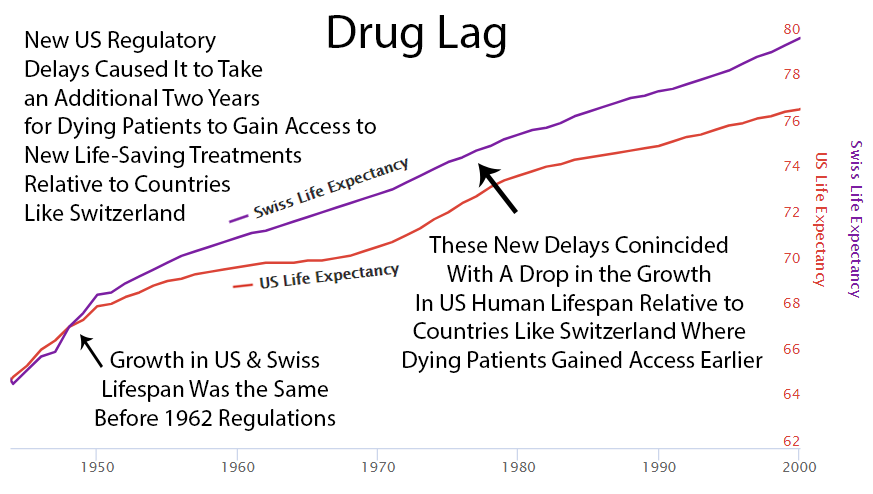
<style>
.page{position:relative;width:873px;height:494px;background:#ffffff}
.page>*{position:absolute;margin:0}
.t1{font:48px "MyriadPro-Regular";color:#000000}
.t2{font:24px "MyriadPro-Regular";color:#000000}
</style>
<div class="page">
<p class="t1" style="left:328px;top:15px;width:178px;height:43px">Drug Lag</p>
<p class="t2" style="left:24px;top:31px;width:352px;height:190px">New US Regulatory<br>Delays Caused It to Take<br>an Additional Two Years<br>for Dying Patients to Gain Access to <br>New Life-Saving Treatments<br>Relative to Countries<br>Like Switzerland</p>
<p class="t2" style="left:403px;top:236px;width:360px;height:137px;text-align:center">These New Delays Conincided <br>With A Drop in the Growth <br>In US Human Lifespan Relative to <br>Countries Like Switzerland Where <br>Dying Patients Gained Access Earlier</p>
<p class="t2" style="left:95px;top:351px;width:241px;height:80px;text-align:center">Growth in US &amp; Swiss<br>Lifespan Was the Same<br>Before 1962 Regulations</p>
</div>
